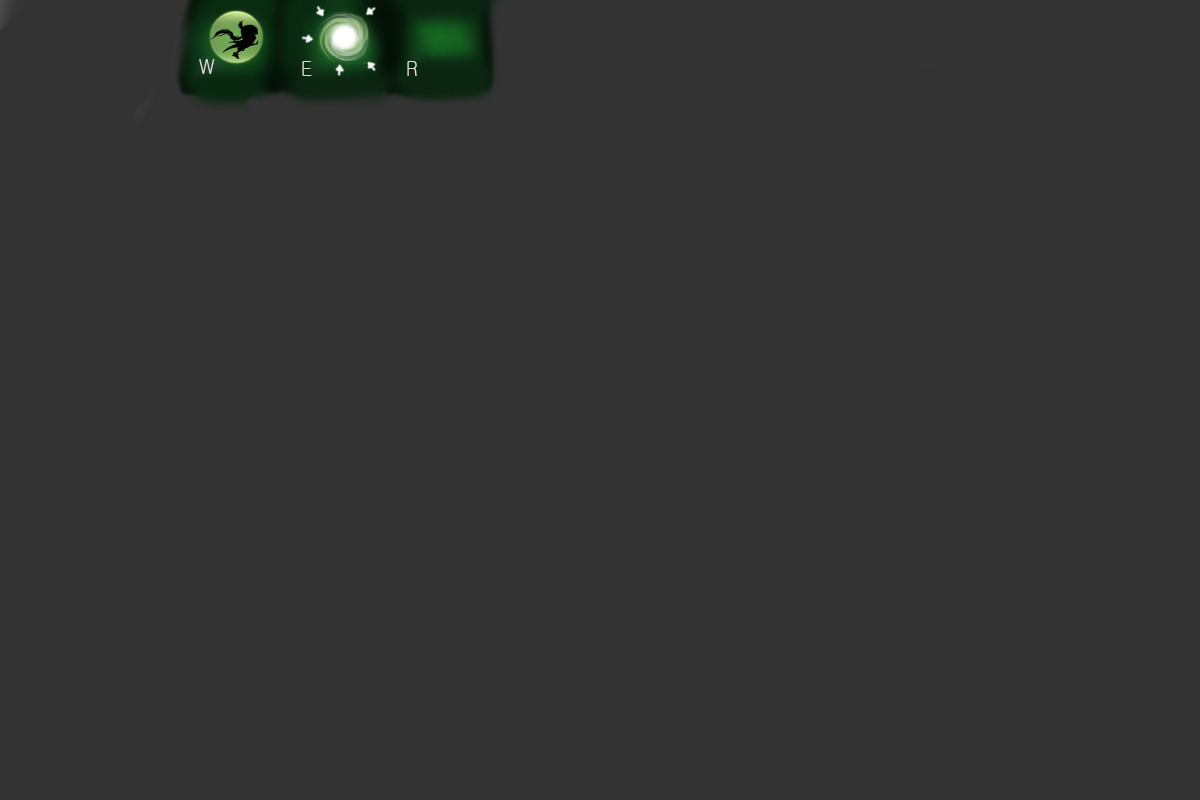
<style>
.page{position:relative;width:1200px;height:800px;background:#333333}
.page>*{position:absolute;margin:0}
.t1{font:20.8px "Gulim";letter-spacing:-0.03em;color:#dbdedc;scale:0.83 1}
.t2{font:20.8px "Gulim";letter-spacing:-0.03em;color:#dbdddb;scale:0.83 1}
.t3{font:20.8px "Gulim";letter-spacing:-0.03em;color:#dadcdb;scale:0.83 1}
</style>
<div class="page">
<p class="t1" style="left:199px;top:59px;width:16px;height:15px">W</p>
<p class="t2" style="left:302px;top:61px;width:10px;height:15px">E</p>
<p class="t3" style="left:407px;top:61px;width:10px;height:15px">R</p>
</div>
